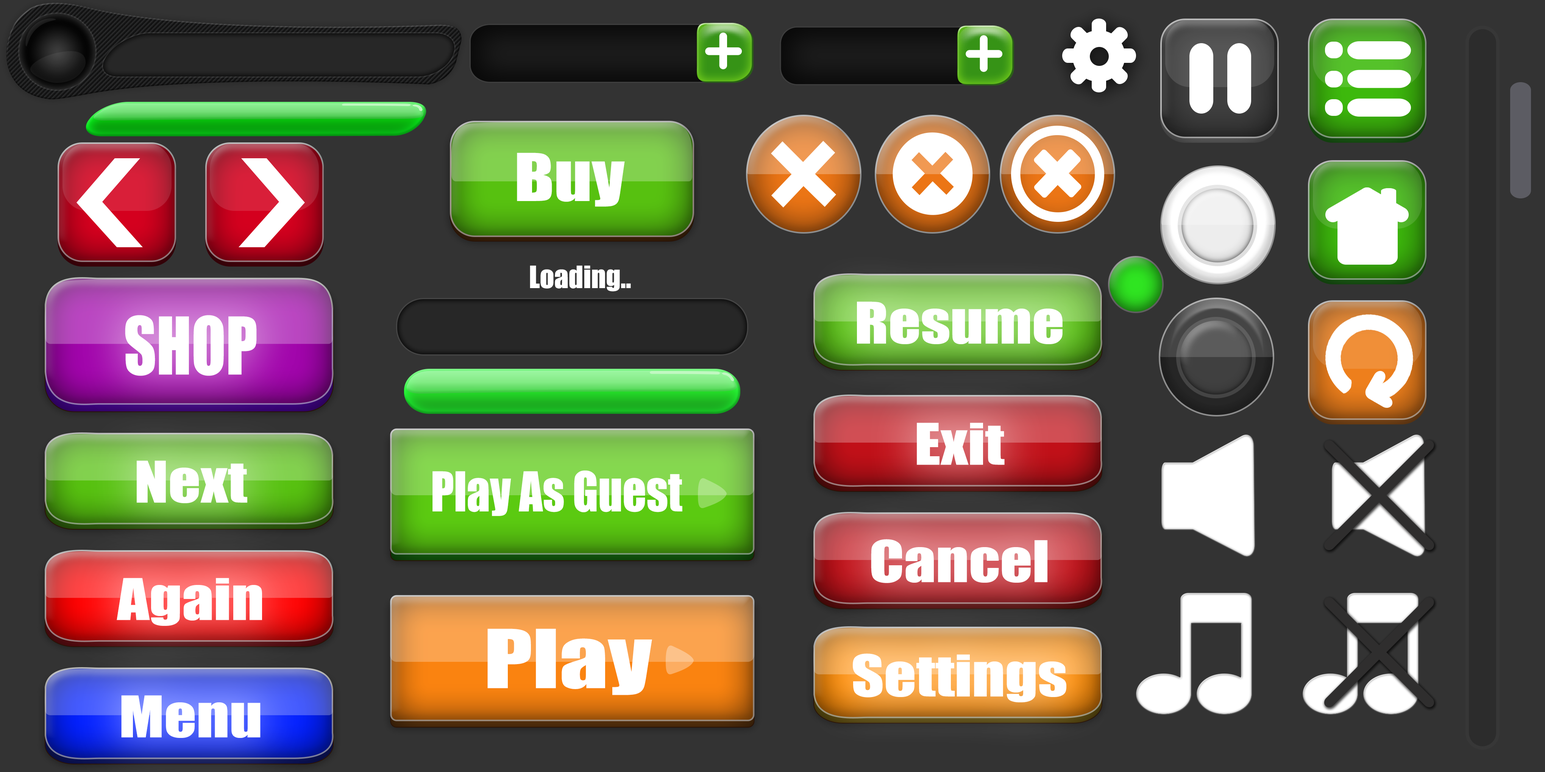
<style>
.page{position:relative;width:1545px;height:772px;background:#333333}
.page>*{position:absolute;margin:0}
.t1{font:60.8px "Impact";color:#ffffff;scale:1.19 1}
.t2{font:28.4px "Impact";color:#ffffff}
.t3{font:52.9px "Impact";color:#ffffff;scale:1.19 1}
.t4{font:73.4px "Impact";color:#ffffff;scale:0.86 1}
.t5{font:50.6px "Impact";color:#ffffff;scale:0.92 1}
.t6{font:75.1px "Impact";color:#ffffff;scale:1.3 1}
</style>
<div class="page">
<p class="t1" style="left:517px;top:153px;width:108px;height:54px">Buy</p>
<p class="t2" style="left:530px;top:265px;width:101px;height:27px">Loading..</p>
<p class="t3" style="left:857px;top:301px;width:205px;height:43px">Resume</p>
<p class="t4" style="left:125px;top:315px;width:132px;height:61px">SHOP</p>
<p class="t3" style="left:917px;top:423px;width:87px;height:42px">Exit</p>
<p class="t3" style="left:137px;top:460px;width:110px;height:43px">Next</p>
<p class="t5" style="left:432px;top:470px;width:250px;height:46px">Play As Guest</p>
<p class="t3" style="left:871px;top:539px;width:176px;height:44px">Cancel</p>
<p class="t3" style="left:117px;top:578px;width:145px;height:48px">Again</p>
<p class="t6" style="left:487px;top:628px;width:165px;height:67px">Play</p>
<p class="t3" style="left:853px;top:653px;width:213px;height:49px">Settings</p>
<p class="t3" style="left:121px;top:695px;width:139px;height:43px">Menu</p>
</div>
